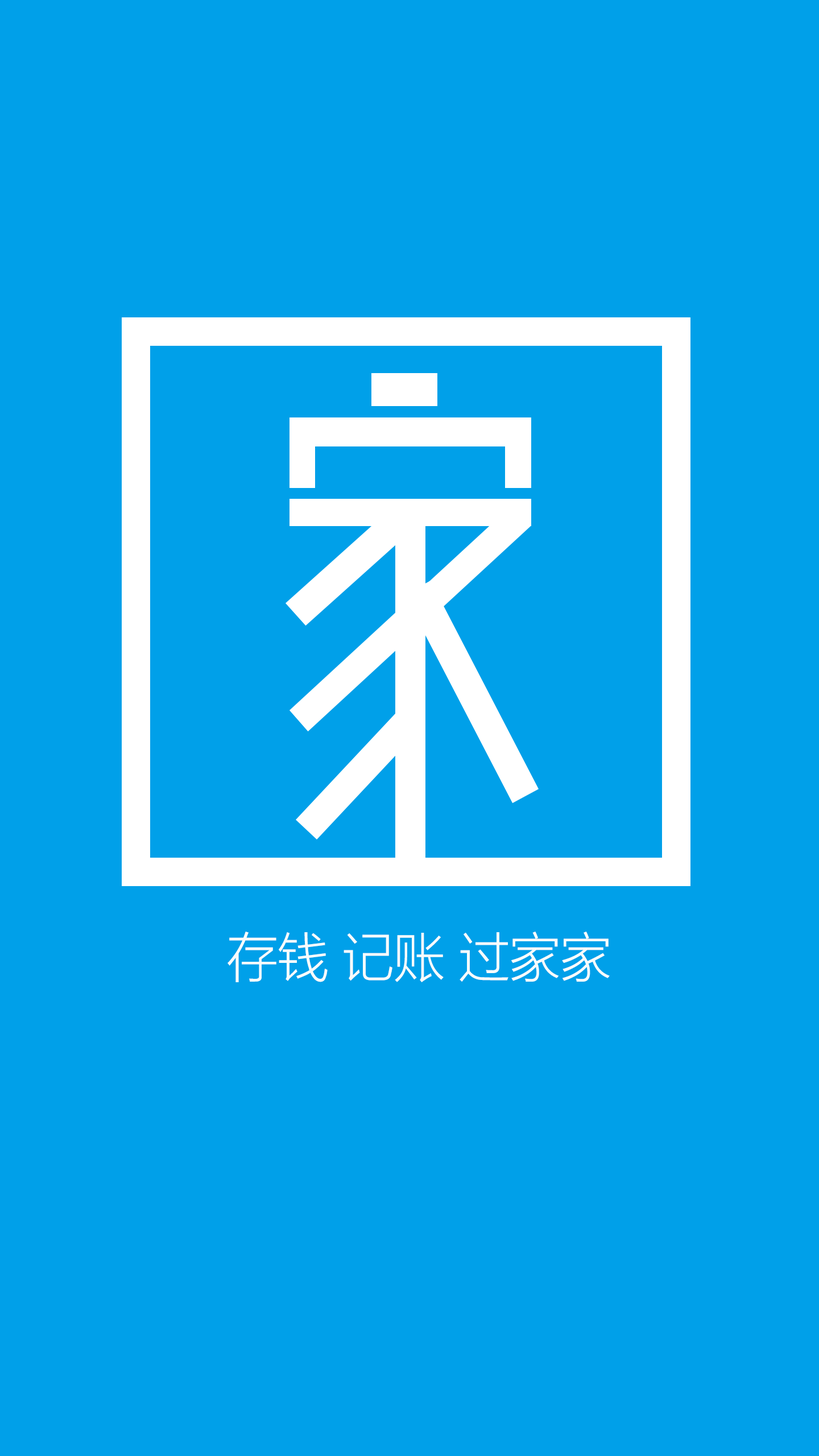
<style>
.page{position:relative;width:819px;height:1456px;background:#00a0e9}
.page>*{position:absolute;margin:0}
.t1{font:53.7px "FZLTXHK--GBK1-0";color:#f8fcfc;scale:0.95 1}
.t2{font:71.7px "FZLTXHK--GBK1-0";color:#f8fcfc;scale:0.95 1}
</style>
<div class="page">
<p class="t1" style="left:227px;top:932px;width:383px;height:50px"><span class="t2"> </span>存钱 记账 过家家</p>
</div>
